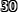
<style>
.page{position:relative;width:18px;height:12px;background:#ffffff}
.page>*{position:absolute;margin:0}
.t1{font:17px "Perpetua-Bold";color:#ffffff}
</style>
<div class="page">
<p class="t1" style="left:1px;top:1px;width:16px;height:10px">30</p>
</div>
